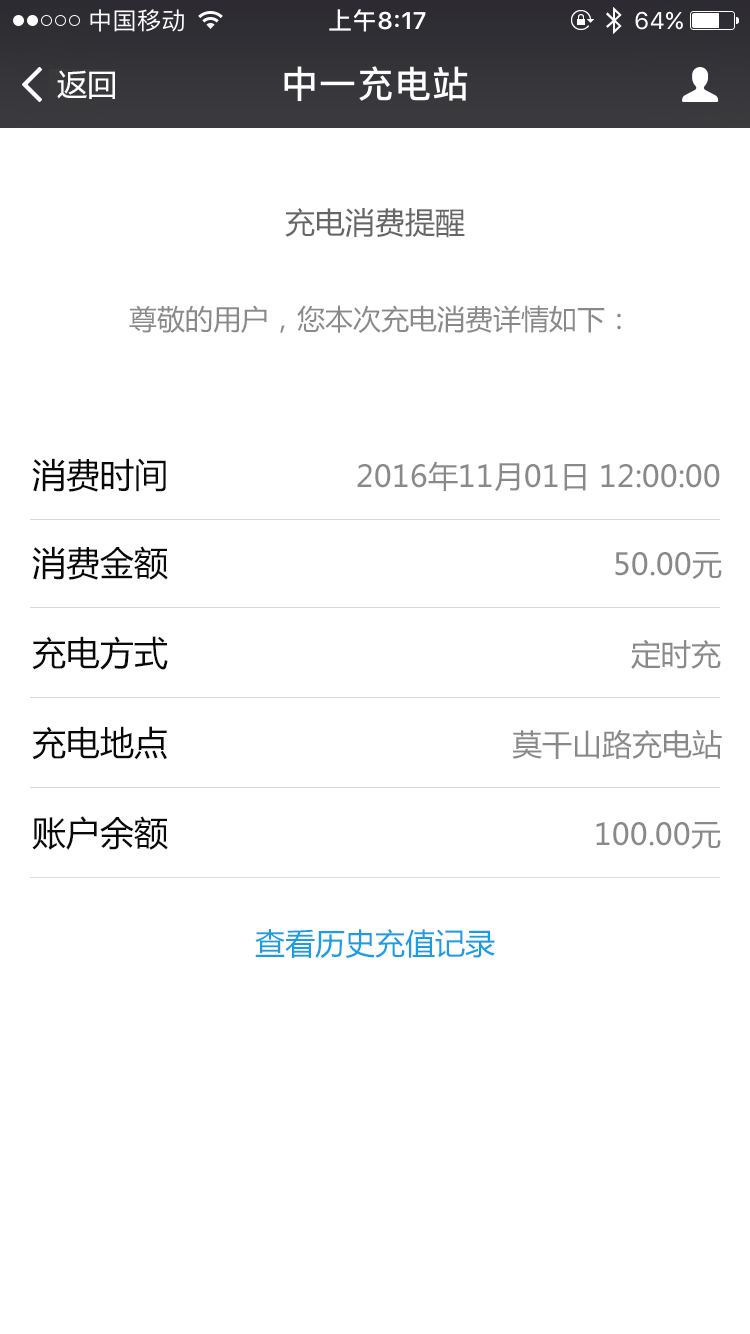
<style>
.page{position:relative;width:750px;height:1334px;background:#ffffff}
.page>*{position:absolute;margin:0}
.t1{font:30px "MicrosoftYaHei";color:#ffffff}
.t2{font:30px "MicrosoftYaHei";color:#666666}
.t3{font:28px "MicrosoftYaHei";color:#898989}
.t4{font:34px "MicrosoftYaHei";color:#090909}
.t5{font:30px "MicrosoftYaHei";color:#898989}
.t6{font:30px "MicrosoftYaHei";color:#1b9de6}
</style>
<div class="page">
<p class="t1" style="left:57px;top:70px;width:58px;height:29px">返回</p>
<p class="t2" style="left:285px;top:208px;width:180px;height:30px">充电消费提醒</p>
<p class="t3" style="left:129px;top:305px;width:492px;height:28px">尊敬的用户，您本次充电消费详情如下：</p>
<p class="t4" style="left:32px;top:458px;width:134px;height:34px">消费时间</p>
<p class="t5" style="left:357px;top:461px;width:363px;height:31px">2016年11月01日 12:00:00</p>
<p class="t4" style="left:32px;top:546px;width:136px;height:34px">消费金额</p>
<p class="t5" style="left:615px;top:552px;width:107px;height:27px">50.00元</p>
<p class="t4" style="left:32px;top:636px;width:136px;height:34px">充电方式</p>
<p class="t5" style="left:631px;top:639px;width:90px;height:30px">定时充</p>
<p class="t4" style="left:32px;top:726px;width:135px;height:34px">充电地点</p>
<p class="t5" style="left:512px;top:729px;width:210px;height:30px">莫干山路充电站</p>
<p class="t4" style="left:32px;top:816px;width:136px;height:34px">账户余额</p>
<p class="t5" style="left:596px;top:822px;width:125px;height:27px">100.00元</p>
<p class="t6" style="left:255px;top:929px;width:240px;height:29px">查看历史充值记录</p>
</div>
